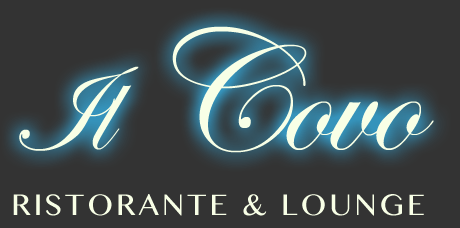
<style>
.page{position:relative;width:460px;height:228px;background:#333333}
.page>*{position:absolute;margin:0}
.t1{font:175px "EdwardianScriptITC";letter-spacing:-0.025em;color:#f8ffe6}
.t2{font:125px "EdwardianScriptITC";letter-spacing:-0.025em;color:#f8ffe6}
.t3{font:30px "BanglaMN";letter-spacing:0.1em;color:#f8ffe6}
</style>
<div class="page">
<p class="t1" style="left:19px;top:26px;width:415px;height:127px"><span class="t2">Il  </span>Covo</p>
<p class="t3" style="left:13px;top:194px;width:411px;height:22px">RISTORANTE &amp; LOUNGE</p>
</div>
